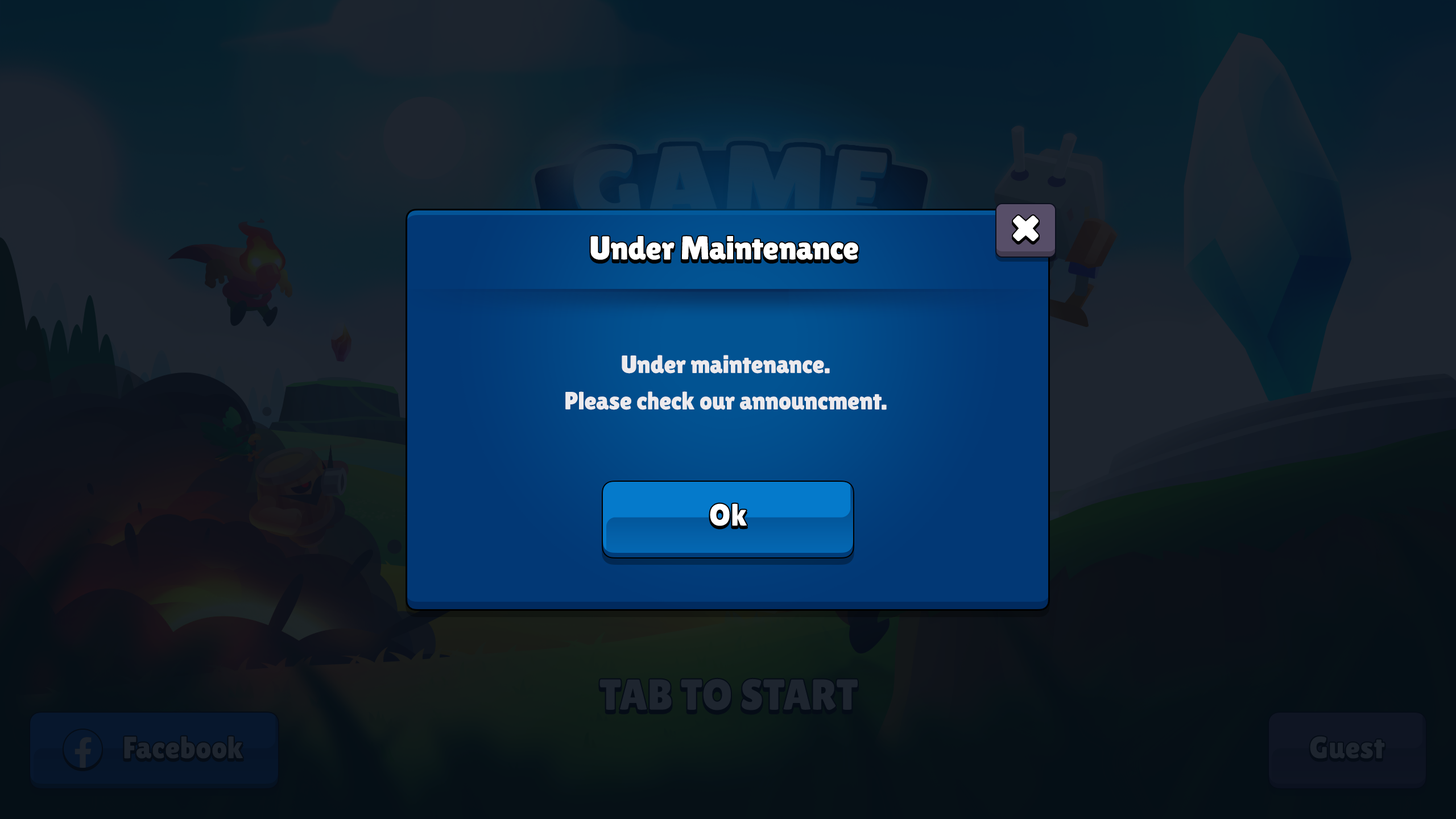
<style>
.page{position:relative;width:1456px;height:819px}
.page>*{position:absolute;margin:0}
.t1{font:33px "LilitaOne";color:#ffffff}
.t2{font:25px/36.4px "LilitaOne";color:#eceaed}
.t3{font:30.7px "LilitaOne";letter-spacing:0.02em;color:#ffffff}
</style>
<div class="page">
<p class="t1" style="left:590px;top:236px;width:268px;height:24px">Under Maintenance</p>
<p class="t2" style="left:565px;top:355px;width:322px;height:55px;text-align:center">Under maintenance. <br>Please check our announcment.</p>
<p class="t3" style="left:710px;top:503px;width:37px;height:23px">Ok</p>
</div>
